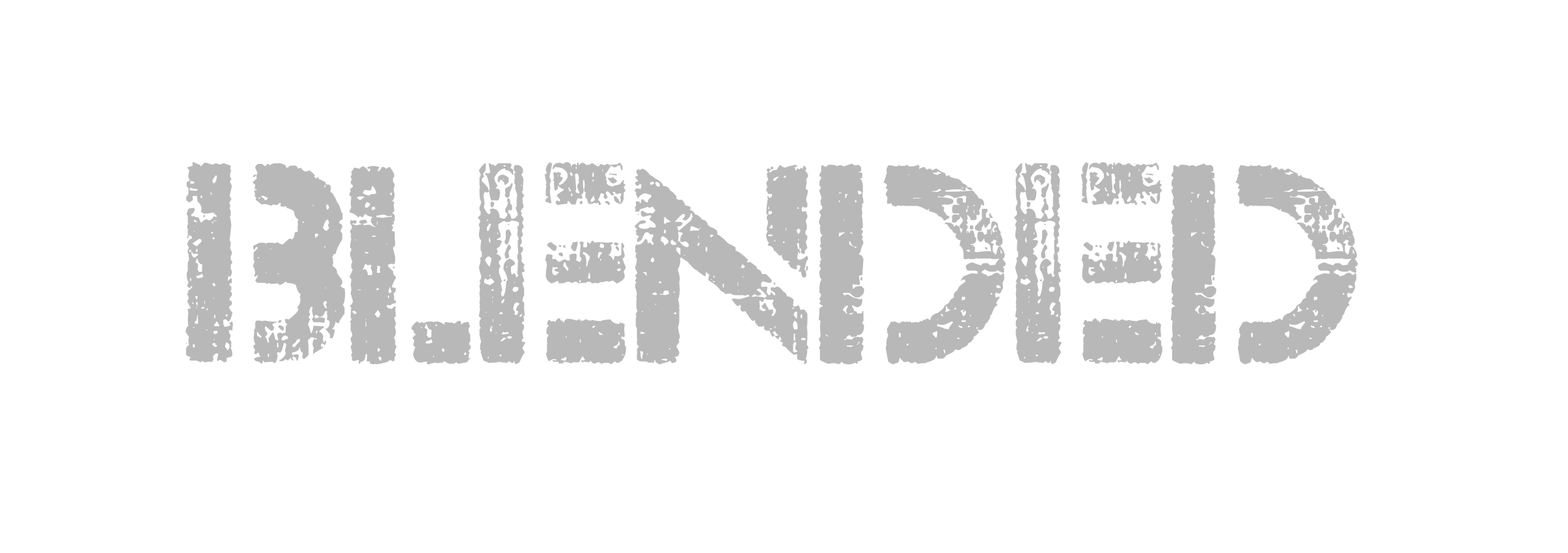
<style>
.page{position:relative;width:1568px;height:553px;background:#ffffff}
.page>*{position:absolute;margin:0}
.t1{font:292.9px "Dock51";color:#b8b8b8}
</style>
<div class="page">
<p class="t1" style="left:186px;top:162px;width:1172px;height:202px">blended</p>
</div>
